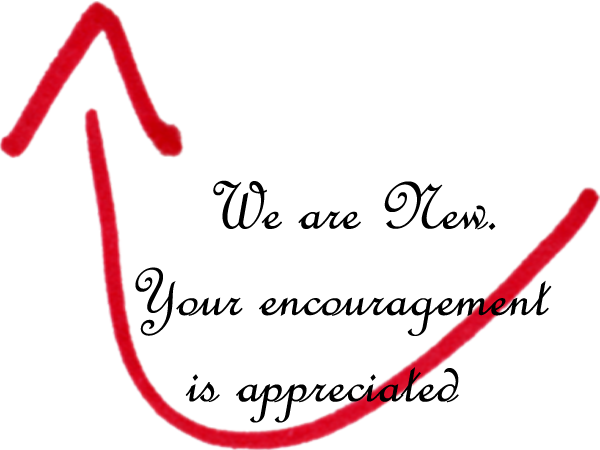
<style>
.page{position:relative;width:600px;height:450px;background:#ffffff}
.page>*{position:absolute;margin:0}
.t1{font:73.1px "FrenchScriptMT";color:#000000}
</style>
<div class="page">
<p class="t1" style="left:135px;top:180px;width:417px;height:243px;text-align:center">We are New.<br>Your encouragement <br>is appreciated</p>
</div>
